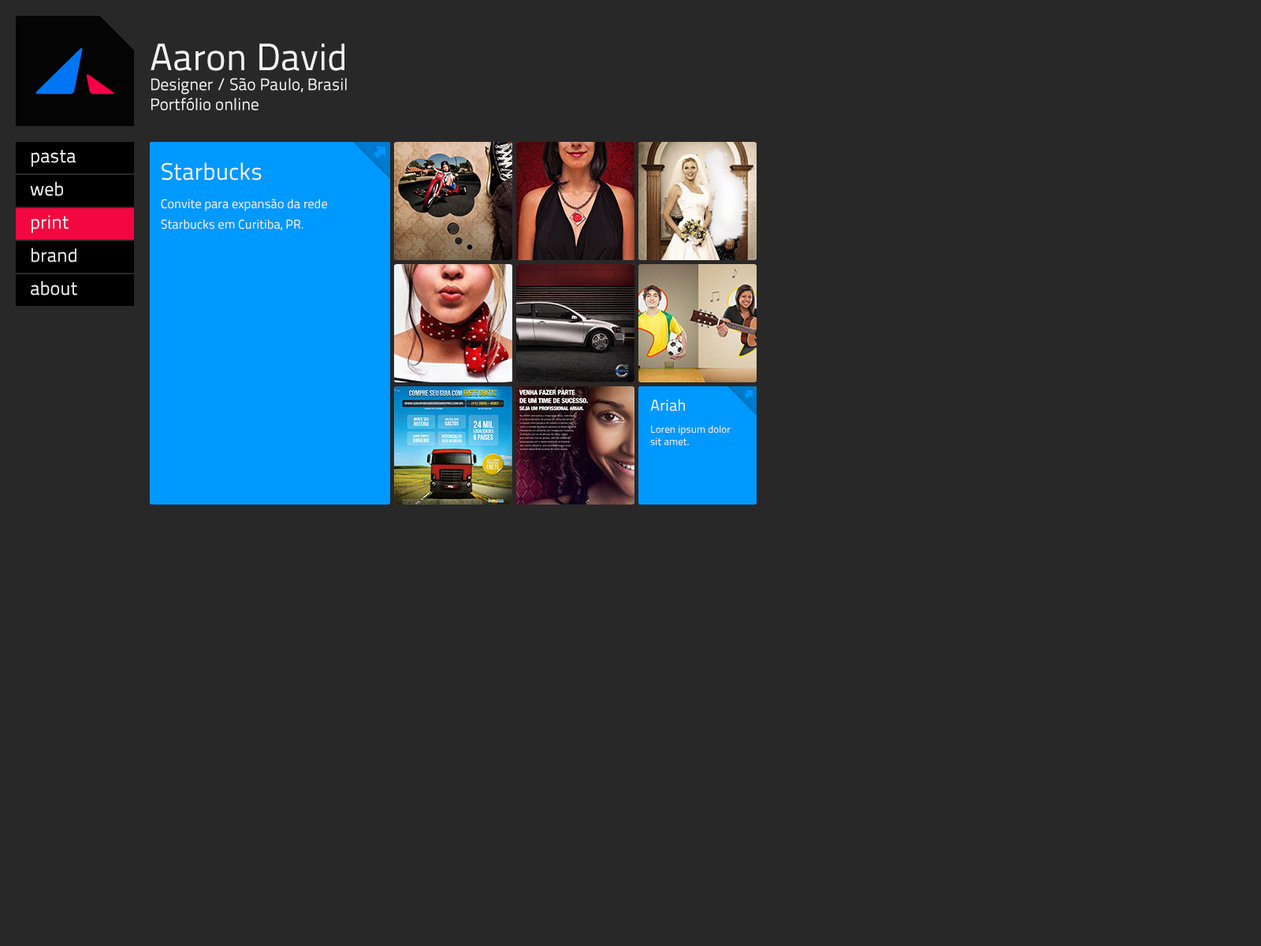
<style>
.page{position:relative;width:1261px;height:946px;background:#282828}
.page>*{position:absolute;margin:0}
.t1{font:16.5px "TitilliumText22L-Regular";color:#f2f2f2}
.t2{font:37.8px "TitilliumText22L-Regular";color:#f2f2f2}
.t3{font:18.9px "TitilliumText22L-Regular";color:#f2f2f2}
.t4{font:12.6px/28.4px "TitilliumText22L-Regular";color:#f2f2f2}
.t5{font:23.6px "TitilliumText22L-Regular";color:#f2f2f2}
.t6{font:12.6px/20.5px "TitilliumText22L-Regular";color:#f2f2f2}
.t7{font:11px/20.5px "TitilliumText22L-Regular";color:#f2f2f2}
.t8{font:10.2px "TitilliumText22L-Regular";color:#f2f2f2}
.t9{font:15.8px "TitilliumText22L-Regular";color:#f2f2f2}
.t10{font:10.2px/22.1px "TitilliumText22L-Regular";color:#f2f2f2}
</style>
<div class="page">
<p class="t1" style="left:151px;top:43px;width:196px;height:67px"><span class="t2">Aaron David<br></span>Designer / São Paulo, Brasil<br>Portfólio online</p>
<p class="t3" style="left:32px;top:150px;width:44px;height:17px">pasta</p>
<p class="t4" style="left:161px;top:162px;width:166px;height:68px"><span class="t5">Starbucks<br></span>Convite para expansão da rede <br><span class="t6">Starbucks em Curitiba, PR</span><span class="t7">.</span></p>
<p class="t3" style="left:30px;top:181px;width:33px;height:15px">web</p>
<p class="t3" style="left:32px;top:215px;width:37px;height:18px">print</p>
<p class="t3" style="left:32px;top:247px;width:44px;height:15px">brand</p>
<p class="t3" style="left:31px;top:281px;width:46px;height:15px">about</p>
<p class="t8" style="left:650px;top:399px;width:81px;height:46px"><span class="t9">Ariah<br></span><span class="t10">L</span>oren ipsum dolor<br>sit amet.</p>
</div>
